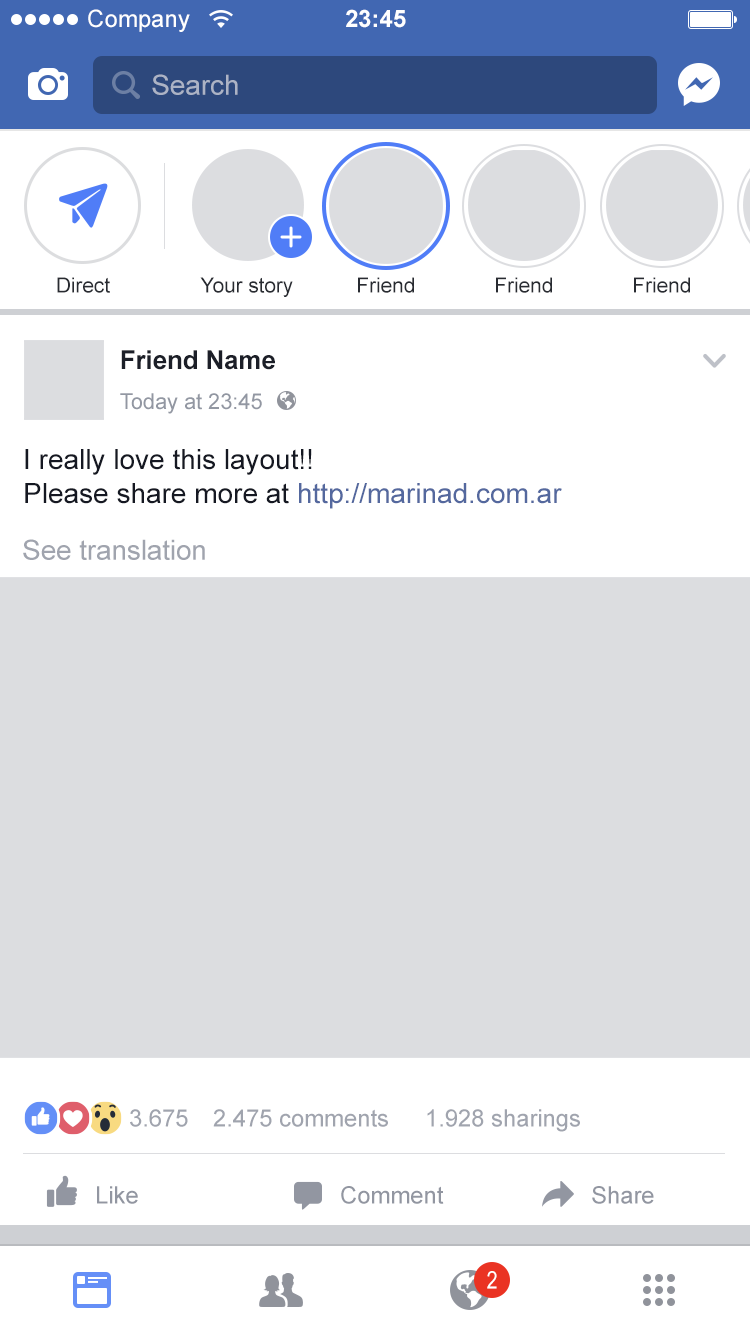
<style>
.page{position:relative;width:750px;height:1334px;background:#ffffff}
.page>*{position:absolute;margin:0}
.t1{font:24px "ArialMT";color:#ffffff}
.t2{font:24px "Arial-BoldMT";color:#ffffff}
.t3{font:28px "ArialMT";letter-spacing:-0.005em;color:#acb3c5}
.t4{font:21px "ArialMT";letter-spacing:-0.005em;color:#282b31}
.t5{font:26px "Arial-BoldMT";letter-spacing:-0.005em;color:#1c1f28}
.t6{font:22px "ArialMT";letter-spacing:-0.005em;color:#9297a2}
.t7{font:28px/34px "ArialMT";color:#151822}
.t8{font:28px/34px "ArialMT";color:#54689e}
.t9{font:28px "ArialMT";letter-spacing:-0.005em;color:#a0a4ae}
.t10{font:24px "ArialMT";letter-spacing:-0.005em;color:#a0a4ae}
.t11{font:24px "ArialMT";letter-spacing:-0.005em;color:#9296a1}
.t12{font:24px "ArialNarrow";color:#ffffff}
</style>
<div class="page">
<p class="t1" style="left:88px;top:9px;width:102px;height:23px">Company</p>
<p class="t2" style="left:346px;top:9px;width:60px;height:19px">23:45</p>
<p class="t3" style="left:152px;top:74px;width:86px;height:21px">Search</p>
<p class="t4" style="left:57px;top:277px;width:53px;height:16px">Direct</p>
<p class="t4" style="left:200px;top:277px;width:93px;height:20px">Your story</p>
<p class="t4" style="left:358px;top:277px;width:56px;height:16px">Friend</p>
<p class="t4" style="left:496px;top:277px;width:56px;height:16px">Friend</p>
<p class="t4" style="left:634px;top:277px;width:56px;height:16px">Friend</p>
<p class="t5" style="left:121px;top:350px;width:154px;height:20px">Friend Name</p>
<p class="t6" style="left:120px;top:393px;width:142px;height:21px">Today at 23:45</p>
<p class="t7" style="left:25px;top:449px;width:537px;height:60px">I really love this layout!!<br>Please share more at <span class="t8">http://marinad.com.ar</span></p>
<p class="t9" style="left:23px;top:539px;width:182px;height:21px">See translation</p>
<p class="t10" style="left:130px;top:1109px;width:58px;height:18px">3.675</p>
<p class="t10" style="left:213px;top:1109px;width:175px;height:18px">2.475 comments</p>
<p class="t10" style="left:427px;top:1109px;width:153px;height:23px">1.928 sharings</p>
<p class="t11" style="left:97px;top:1186px;width:41px;height:18px">Like</p>
<p class="t11" style="left:341px;top:1186px;width:103px;height:18px">Comment</p>
<p class="t11" style="left:592px;top:1186px;width:62px;height:18px">Share</p>
<p class="t12" style="left:487px;top:1271px;width:10px;height:18px">2</p>
</div>
